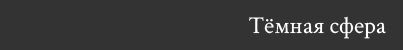
<style>
.page{position:relative;width:403px;height:50px;background:#333333}
.page>*{position:absolute;margin:0}
.t1{font:24px "CrimsonText-Regular";color:#ffffff}
</style>
<div class="page">
<p class="t1" style="left:249px;top:16px;width:137px;height:23px">Тёмная сфера</p>
</div>
